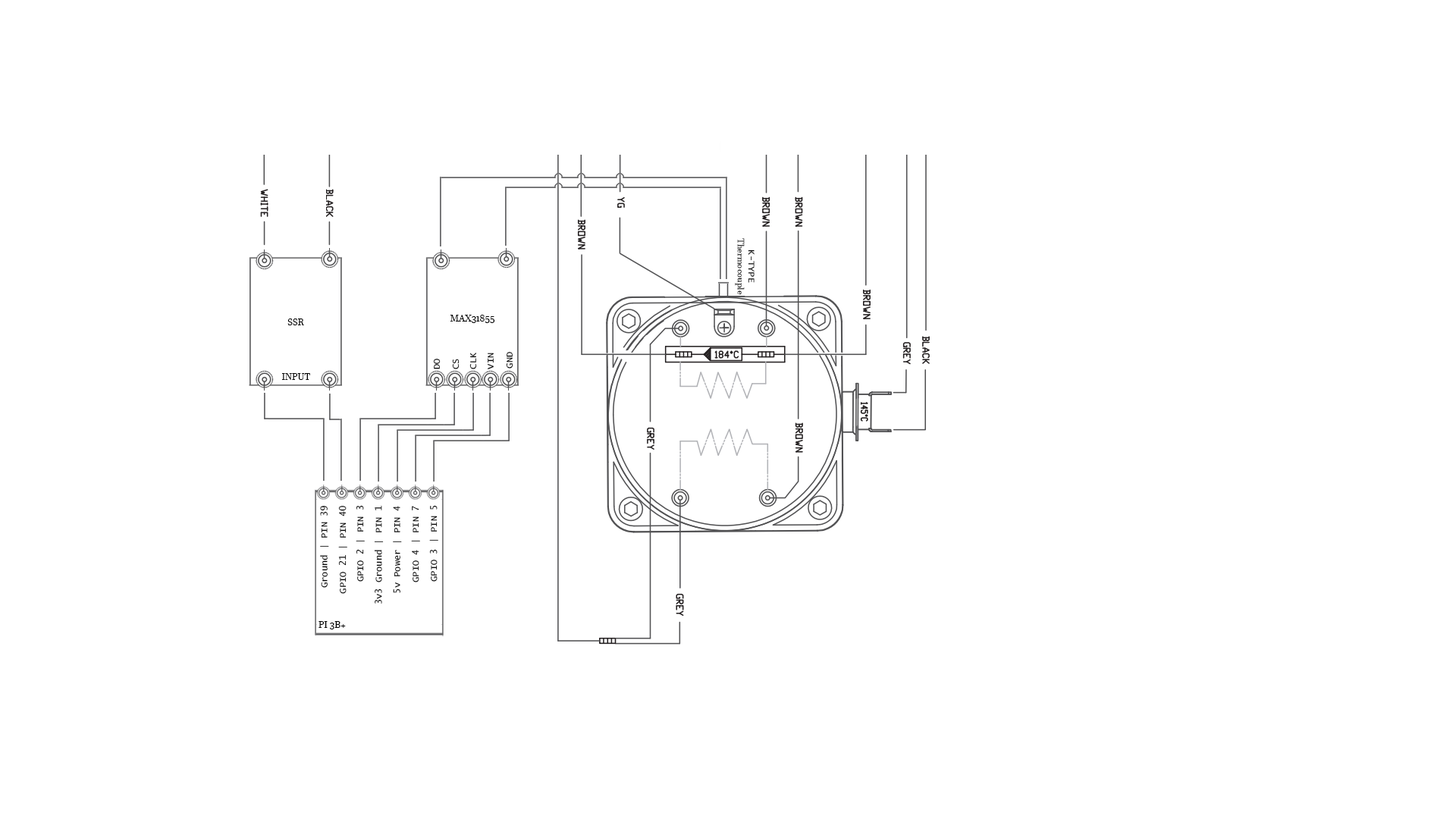
<style>
.page{position:relative;width:1456px;height:819px;background:#ffffff}
.page>*{position:absolute;margin:0}
.t1{font:9.1px "JavaneseText";color:#000000}
.t2{font:9.1px "LucidaConsole";color:#000000}
</style>
<div class="page">
<p class="t1" style="left:735px;top:238px;width:20px;height:57px;text-align:center;rotate:90deg"><span class="t2">K-TYPE<br></span>Thermocouple</p>
<p class="t1" style="left:450px;top:315px;width:45px;height:8px"><span class="t2"><br></span>MAX31855</p>
<p class="t1" style="left:287px;top:318px;width:17px;height:7px"><span class="t2"><br></span>SSR</p>
<p class="t2" style="left:469px;top:353px;width:8px;height:16px;rotate:-90deg">CLK</p>
<p class="t2" style="left:488px;top:353px;width:6px;height:16px;rotate:-90deg">VIN</p>
<p class="t2" style="left:506px;top:352px;width:7px;height:17px;rotate:-90deg">GND</p>
<p class="t2" style="left:433px;top:359px;width:8px;height:10px;rotate:-90deg">DO</p>
<p class="t2" style="left:452px;top:359px;width:8px;height:10px;rotate:-90deg">CS</p>
<p class="t1" style="left:282px;top:373px;width:28px;height:7px"><span class="t2"><br></span>INPUT</p>
<p class="t2" style="left:320px;top:506px;width:9px;height:82px;rotate:-90deg">Ground | PIN 39</p>
<p class="t2" style="left:338px;top:506px;width:9px;height:88px;rotate:-90deg">GPIO 21 | PIN 40</p>
<p class="t2" style="left:356px;top:505px;width:9px;height:77px;rotate:-90deg">GPIO 2 | PIN 3</p>
<p class="t2" style="left:374px;top:505px;width:10px;height:99px;rotate:-90deg">3v3 Ground | PIN 1</p>
<p class="t2" style="left:393px;top:506px;width:9px;height:87px;rotate:-90deg">5v Power | PIN 4</p>
<p class="t2" style="left:411px;top:506px;width:9px;height:76px;rotate:-90deg">GPIO 4 | PIN 7</p>
<p class="t2" style="left:429px;top:505px;width:9px;height:77px;rotate:-90deg">GPIO 3 | PIN 5</p>
<p class="t1" style="left:318px;top:621px;width:28px;height:8px"><span class="t2"><br></span>PI 3B+</p>
</div>
